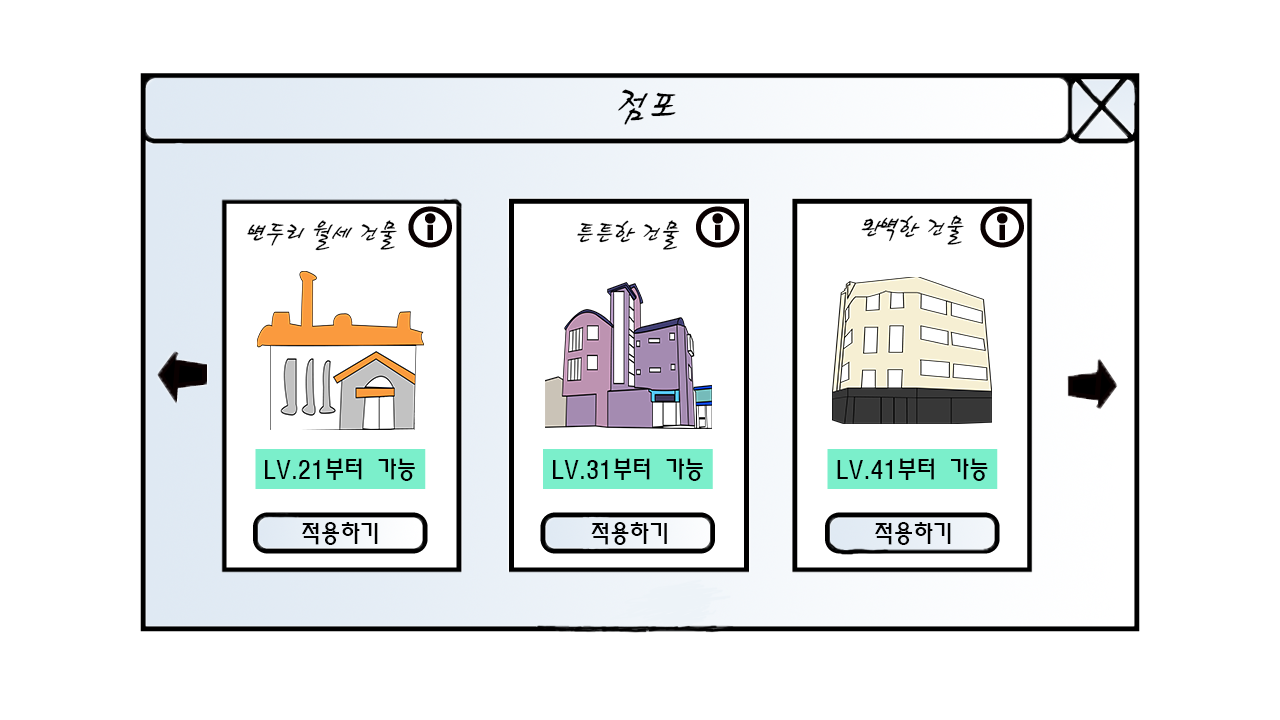
<style>
.page{position:relative;width:1280px;height:720px;background:#ffffff}
.page>*{position:absolute;margin:0}
.t1{font:48px "HaanCjaB";color:#000000}
.t2{font:30px "HaanCjaB";color:#000000}
.t3{font:24px "MoeumTR-HM";color:#000000}
</style>
<div class="page">
<p class="t1" style="left:618px;top:89px;width:58px;height:36px">점포</p>
<p class="t2" style="left:247px;top:220px;width:150px;height:31px">변두리 월세 건물</p>
<p class="t2" style="left:577px;top:220px;width:103px;height:30px">튼튼한 건물</p>
<p class="t2" style="left:861px;top:215px;width:103px;height:30px">완벽한 건물</p>
<p class="t3" style="left:265px;top:458px;width:150px;height:23px">LV.21부터 가능</p>
<p class="t3" style="left:553px;top:458px;width:150px;height:23px">LV.31부터 가능</p>
<p class="t3" style="left:837px;top:458px;width:151px;height:23px">LV.41부터 가능</p>
<p class="t3" style="left:302px;top:522px;width:76px;height:23px">적용하기</p>
<p class="t3" style="left:591px;top:522px;width:76px;height:23px">적용하기</p>
<p class="t3" style="left:875px;top:522px;width:76px;height:23px">적용하기</p>
</div>
